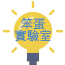
<style>
.page{position:relative;width:65px;height:65px;background:#ffffff}
.page>*{position:absolute;margin:0}
.t1{font:12.5px/12.5px "STHeitiTC-Light";color:#3481c4}
</style>
<div class="page">
<p class="t1" style="left:15px;top:17px;width:36px;height:25px">笨蛋<br>實驗室</p>
</div>
